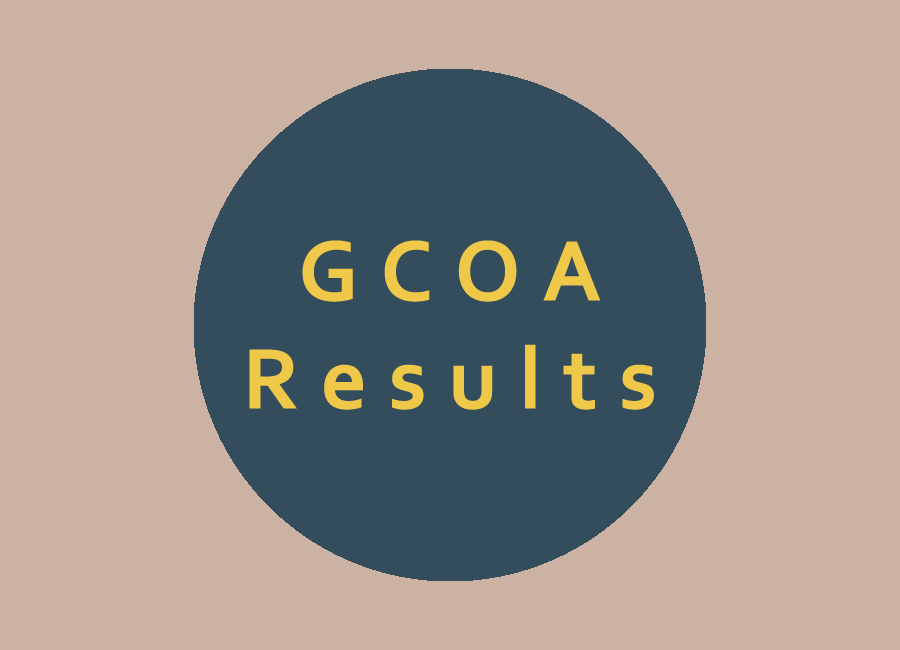
<style>
.page{position:relative;width:900px;height:650px;background:#ccb2a3}
.page>*{position:absolute;margin:0}
.t1{font:90px "Corbel-Bold";letter-spacing:0.24em;color:#efc84a}
</style>
<div class="page">
<p class="t1" style="left:249px;top:240px;width:405px;height:170px;text-align:center">GCOA<br>Results</p>
</div>
